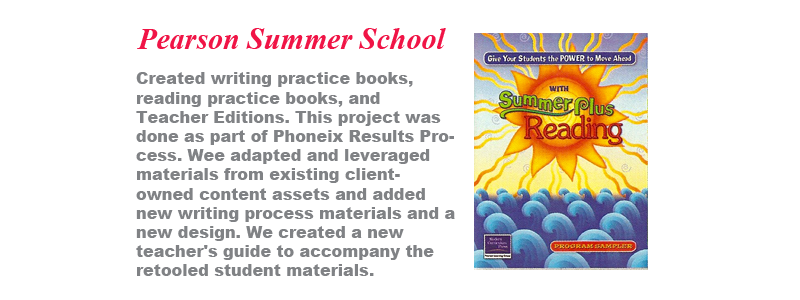
<style>
.page{position:relative;width:800px;height:300px;background:#ffffff}
.page>*{position:absolute;margin:0}
.t1{font:30px "TimesNewRomanPS-BoldItalicMT";color:#f01446}
.t2{font:16px "Arial-Black";color:#808285}
</style>
<div class="page">
<p class="t1" style="left:137px;top:28px;width:309px;height:21px">Pearson Summer School</p>
<p class="t2" style="left:136px;top:72px;width:319px;height:204px">Created writing practice books, reading practice books, and Teacher Editions. This project was done as part of Phoneix Results Process. Wee adapted and leveraged materials from existing client-owned content assets and added new writing process materials and a new design. We created a new teacher's guide to accompany the retooled student materials.</p>
</div>
